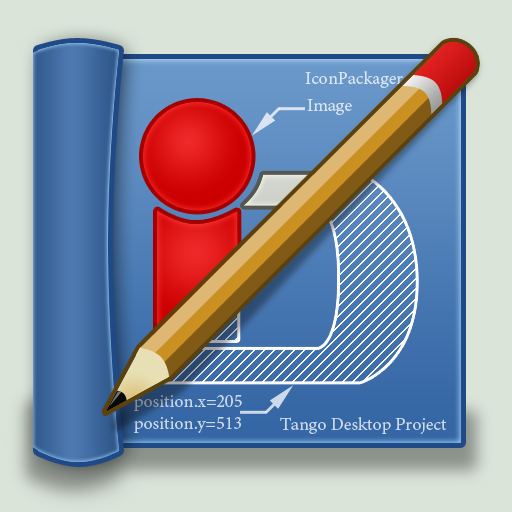
<style>
.page{position:relative;width:512px;height:512px;background:#dae4d9}
.page>*{position:absolute;margin:0}
.t1{font:18px "MinionPro-Regular";color:#d9e5f1}
.t2{font:18px "MinionPro-Regular";color:#d8e4f1}
.t3{font:18px "MinionPro-Regular";color:#cdd9e8}
.t4{font:18px "MinionPro-Regular";color:#ccd9e8}
</style>
<div class="page">
<p class="t1" style="left:305px;top:71px;width:98px;height:17px">IconPackager</p>
<p class="t2" style="left:307px;top:99px;width:45px;height:16px">Image</p>
<p class="t3" style="left:134px;top:395px;width:108px;height:38px">position.x=205<br>position.y=513</p>
<p class="t4" style="left:280px;top:417px;width:167px;height:17px">Tango Desktop Project</p>
</div>
